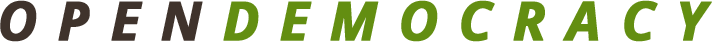
<style>
.page{position:relative;width:712px;height:42px;background:#ffffff}
.page>*{position:absolute;margin:0}
.t1{font:53.9px "OpenSans-BoldItalic";letter-spacing:0.36em;color:#638e11;text-transform:uppercase;font-weight:bold}
.t2{font:53.9px "OpenSans-BoldItalic";letter-spacing:0.36em;color:#3f332c;text-transform:uppercase;font-weight:bold}
</style>
<div class="page">
<p class="t1" style="left:0px;top:0px;width:712px;height:42px"><span class="t2">open</span>democracy</p>
</div>
